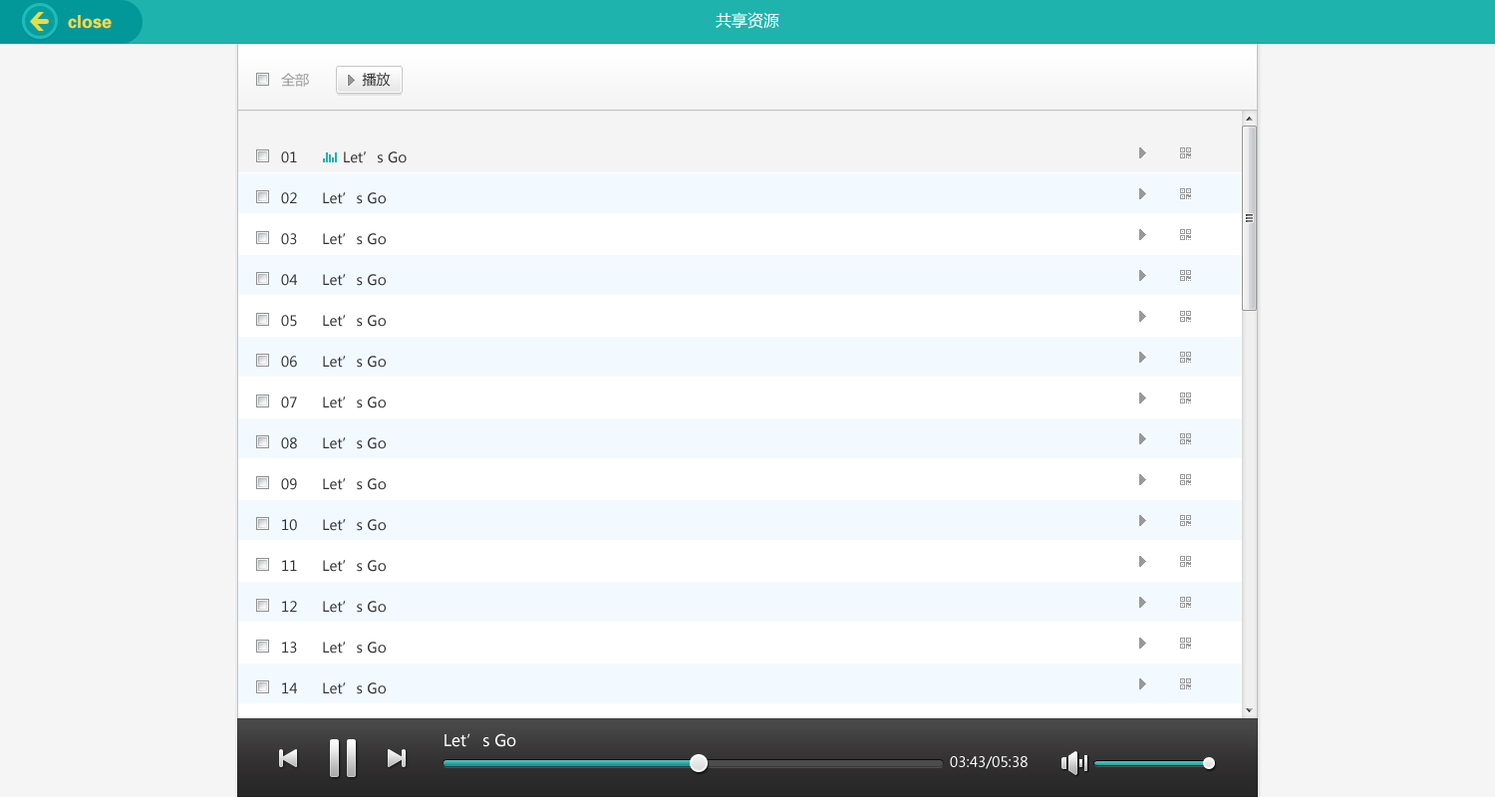
<style>
.page{position:relative;width:1495px;height:797px;background:#f5f5f5}
.page>*{position:absolute;margin:0}
.t1{font:15.9px "MicrosoftYaHei";color:#ffffff}
.t2{font:14px "MicrosoftYaHei";color:#999999}
.t3{font:14px "MicrosoftYaHei";color:#333333}
.t4{font:14px "MicrosoftYaHei";color:#ffffff}
</style>
<div class="page">
<p class="t1" style="left:716px;top:12px;width:64px;height:17px">共享资源</p>
<p class="t2" style="left:281px;top:73px;width:28px;height:14px">全部</p>
<p class="t3" style="left:362px;top:72px;width:29px;height:15px">播放</p>
<p class="t3" style="left:281px;top:152px;width:126px;height:11px">01           Let’s Go</p>
<p class="t3" style="left:281px;top:192px;width:105px;height:12px">02      Let’s Go</p>
<p class="t3" style="left:281px;top:233px;width:105px;height:12px">03      Let’s Go</p>
<p class="t3" style="left:281px;top:274px;width:105px;height:12px">04      Let’s Go</p>
<p class="t3" style="left:281px;top:315px;width:105px;height:12px">05      Let’s Go</p>
<p class="t3" style="left:281px;top:356px;width:105px;height:12px">06      Let’s Go</p>
<p class="t3" style="left:281px;top:397px;width:105px;height:12px">07      Let’s Go</p>
<p class="t3" style="left:281px;top:438px;width:105px;height:12px">08      Let’s Go</p>
<p class="t3" style="left:281px;top:478px;width:105px;height:12px">09      Let’s Go</p>
<p class="t3" style="left:282px;top:519px;width:104px;height:12px">10      Let’s Go</p>
<p class="t3" style="left:282px;top:560px;width:104px;height:12px">11      Let’s Go</p>
<p class="t3" style="left:282px;top:601px;width:104px;height:12px">12      Let’s Go</p>
<p class="t3" style="left:282px;top:642px;width:104px;height:12px">13      Let’s Go</p>
<p class="t3" style="left:282px;top:683px;width:104px;height:12px">14      Let’s Go</p>
<p class="t1" style="left:445px;top:734px;width:71px;height:14px">Let’s Go</p>
<p class="t4" style="left:950px;top:757px;width:78px;height:13px">03:43/05:38</p>
</div>
